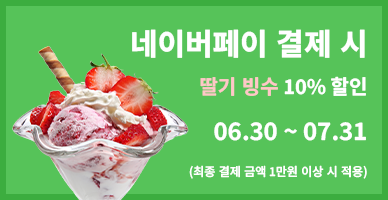
<style>
.page{position:relative;width:388px;height:200px;background:#56c359}
.page>*{position:absolute;margin:0}
.t1{font:30px "NotoSansKR-ExtraBold";color:#ffffff}
.t2{font:20px "NotoSansKR-Bold";color:#ffffff}
.t3{font:20px "NotoSansKR-Bold";color:#ffc7c7}
.t4{font:24px "NotoSansKR-Bold";color:#ffffff}
.t5{font:12px "NotoSansKR-Medium";color:#ffffff}
</style>
<div class="page">
<p class="t1" style="left:132px;top:29px;width:233px;height:29px">네이버페이 결제 시</p>
<p class="t2" style="left:200px;top:76px;width:166px;height:20px"><span class="t3">딸기 빙수 </span>10% 할인</p>
<p class="t4" style="left:214px;top:122px;width:152px;height:19px">06.30 ~ 07.31</p>
<p class="t5" style="left:189px;top:165px;width:178px;height:14px">(최종 결제 금액 1만원 이상 시 적용)</p>
</div>
